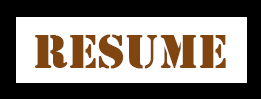
<style>
.page{position:relative;width:261px;height:99px;background:#ffffff}
.page>*{position:absolute;margin:0}
.t1{font:50px "Stencil";color:#814510}
</style>
<div class="page">
<p class="t1" style="left:35px;top:34px;width:191px;height:35px">RESUME</p>
</div>
